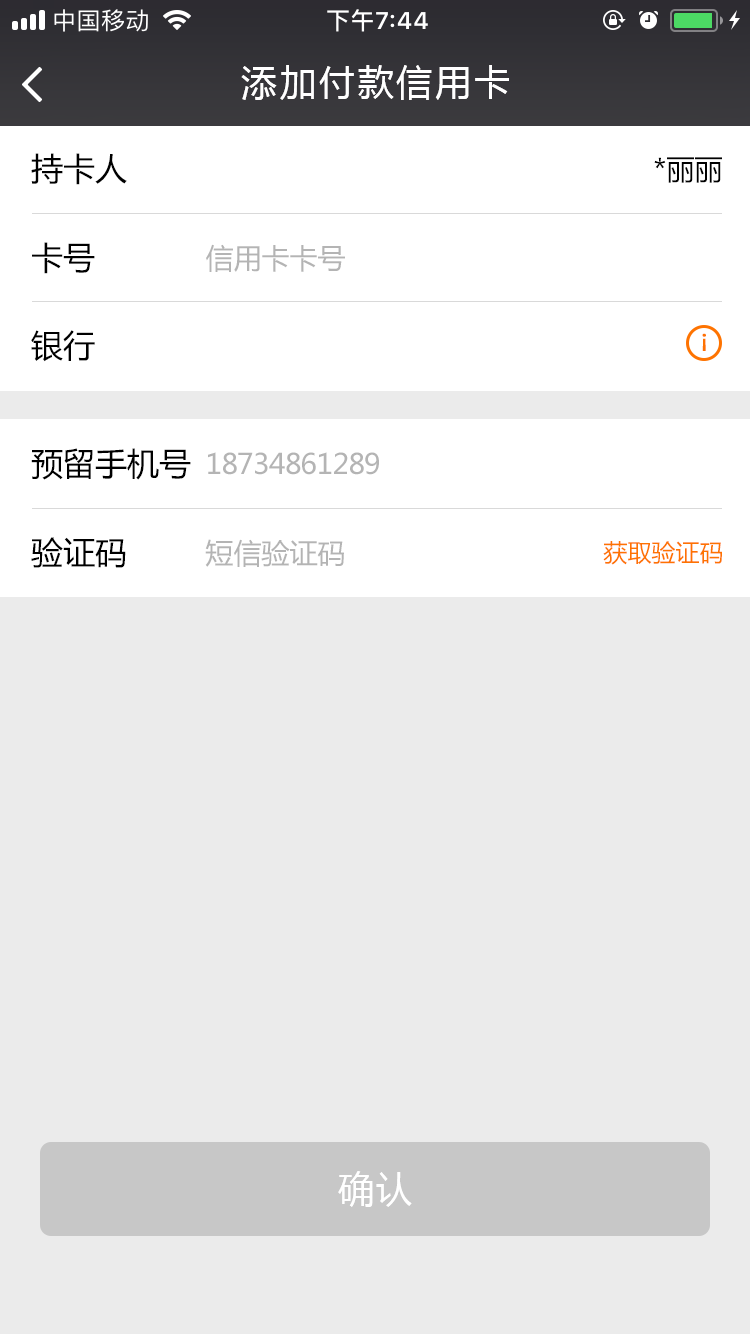
<style>
.page{position:relative;width:750px;height:1334px;background:#ebebeb}
.page>*{position:absolute;margin:0}
.t1{font:36px "MicrosoftYaHei";letter-spacing:0.08em;color:#ffffff}
.t2{font:32px "MicrosoftYaHei";color:#000000}
.t3{font:28px "MicrosoftYaHei";color:#000000}
.t4{font:28px "MicrosoftYaHei";color:#b4b4b4}
.t5{font:22px "MicrosoftYaHei";color:#fe7301;font-weight:bold}
.t6{font:28px "MicrosoftYaHei";letter-spacing:-0.02em;color:#b4b4b4}
.t7{font:24px "MicrosoftYaHei";color:#fe7301}
</style>
<div class="page">
<p class="t1" style="left:241px;top:65px;width:268px;height:35px">添加付款信用卡</p>
<p class="t2" style="left:31px;top:153px;width:96px;height:32px">持卡人</p>
<p class="t3" style="left:654px;top:157px;width:68px;height:26px">*丽丽</p>
<p class="t2" style="left:32px;top:242px;width:63px;height:32px">卡号</p>
<p class="t4" style="left:206px;top:244px;width:139px;height:28px">信用卡卡号</p>
<p class="t2" style="left:31px;top:330px;width:64px;height:32px">银行</p>
<p class="t5" style="left:702px;top:333px;width:4px;height:18px;rotate:180deg">！</p>
<p class="t2" style="left:31px;top:448px;width:160px;height:32px">预留手机号</p>
<p class="t6" style="left:208px;top:452px;width:171px;height:23px">18734861289</p>
<p class="t2" style="left:31px;top:537px;width:95px;height:31px">验证码</p>
<p class="t4" style="left:205px;top:539px;width:139px;height:28px">短信验证码</p>
<p class="t7" style="left:603px;top:541px;width:119px;height:24px">获取验证码</p>
<p class="t1" style="left:338px;top:1171px;width:74px;height:36px">确认</p>
</div>
